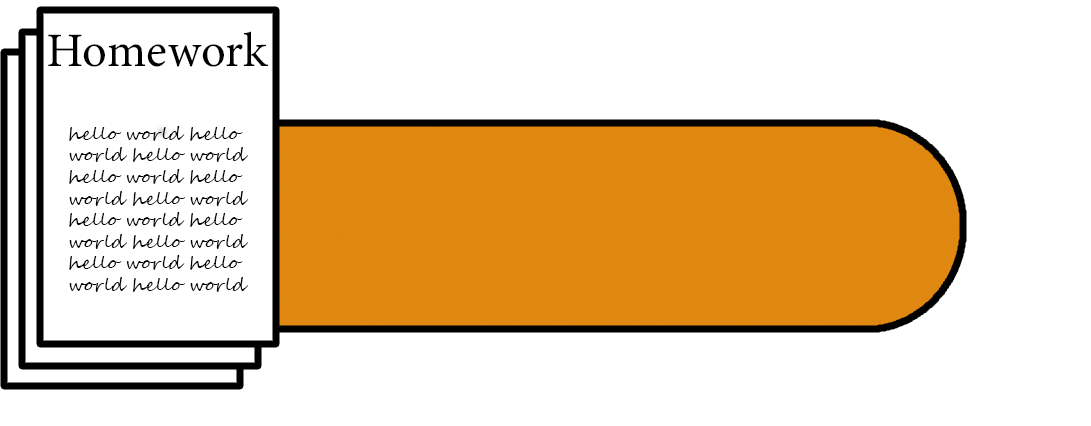
<style>
.page{position:relative;width:1091px;height:426px;background:#ffffff}
.page>*{position:absolute;margin:0}
.t1{font:48px "MinionVariableConcept-Roman";color:#000000}
.t2{font:18px "SegoeScript";color:#000000}
</style>
<div class="page">
<p class="t1" style="left:48px;top:31px;width:220px;height:36px">Homework</p>
<p class="t2" style="left:69px;top:126px;width:179px;height:166px">hello world hello world hello world hello world hello world hello world hello world hello world hello world hello world hello world hello world</p>
</div>
